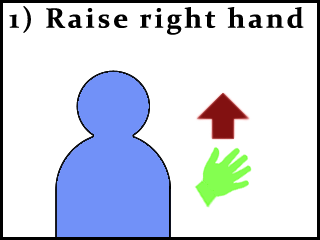
<style>
.page{position:relative;width:320px;height:240px;background:#ffffff}
.page>*{position:absolute;margin:0}
.t1{font:28px "Constantia-Bold";letter-spacing:0.1em;color:#000000}
</style>
<div class="page">
<p class="t1" style="left:9px;top:6px;width:295px;height:29px">1) Raise right hand</p>
</div>
